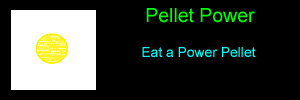
<style>
.page{position:relative;width:300px;height:100px;background:#000000}
.page>*{position:absolute;margin:0}
.t1{font:19.4px "ArialMT";color:#00ff00}
.t2{font:13.9px "ArialMT";color:#00ffff}
</style>
<div class="page">
<p class="t1" style="left:146px;top:8px;width:109px;height:15px">Pellet Power</p>
<p class="t2" style="left:142px;top:47px;width:114px;height:10px">Eat a Power Pellet</p>
</div>
